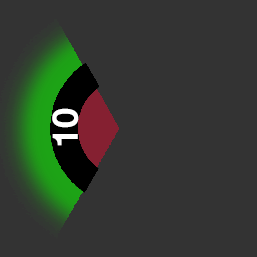
<style>
.page{position:relative;width:257px;height:257px;background:#333333}
.page>*{position:absolute;margin:0}
.t1{font:35.9px "HelveticaNeue-Bold";color:#ffffff}
</style>
<div class="page">
<p class="t1" style="left:52px;top:108px;width:27px;height:38px;rotate:-90deg">10</p>
</div>
